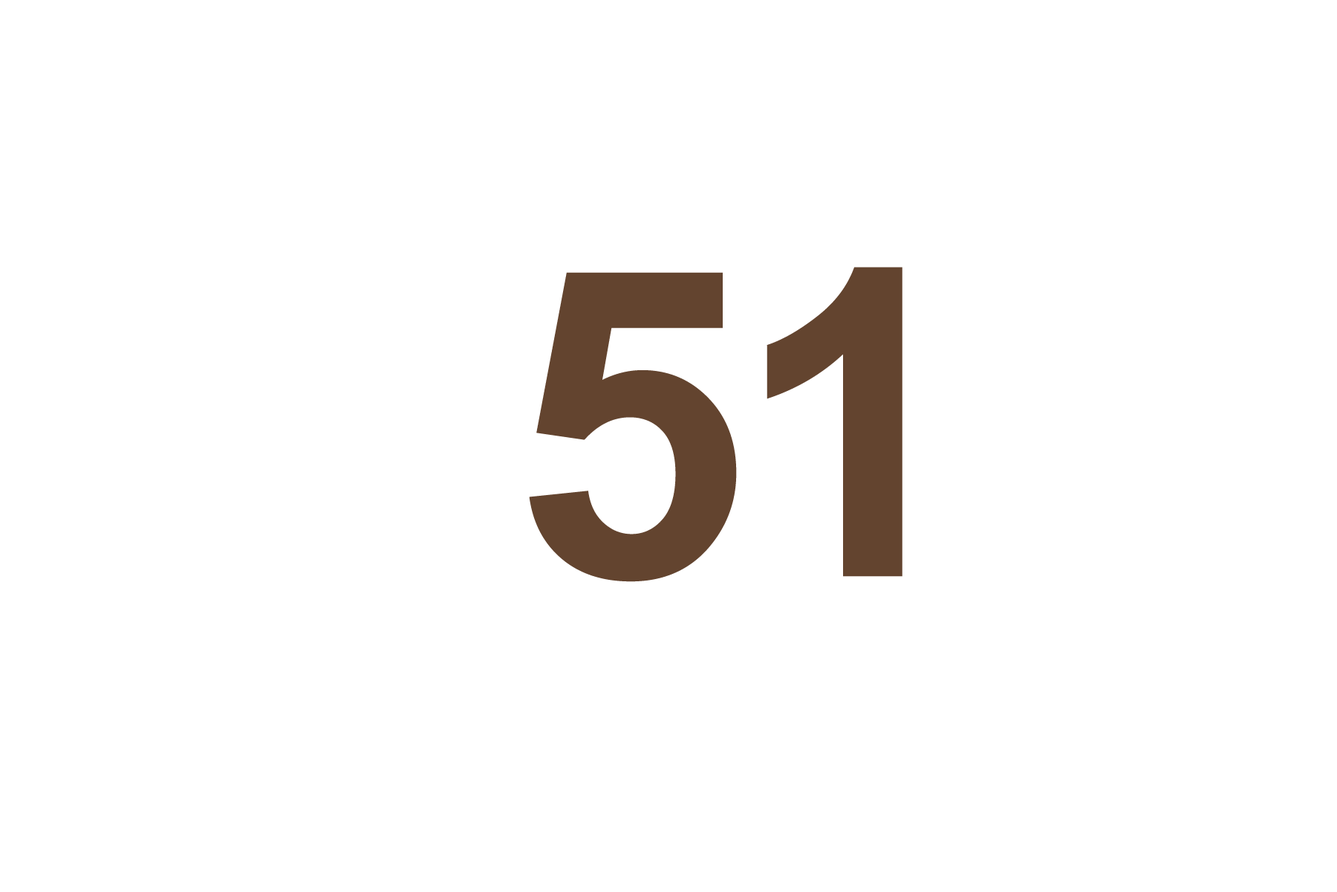
<style>
.page{position:relative;width:1337px;height:892px;background:#ffffff}
.page>*{position:absolute;margin:0}
.t1{font:429.6px "Arial-BoldMT";color:#63442f}
</style>
<div class="page">
<p class="t1" style="left:529px;top:267px;width:374px;height:315px">51</p>
</div>
